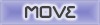
<style>
.page{position:relative;width:100px;height:25px}
.page>*{position:absolute;margin:0}
.t1{font:18px "Chilopod-Regular";color:#404040}
</style>
<div class="page">
<p class="t1" style="left:25px;top:6px;width:51px;height:12px">Move</p>
</div>
